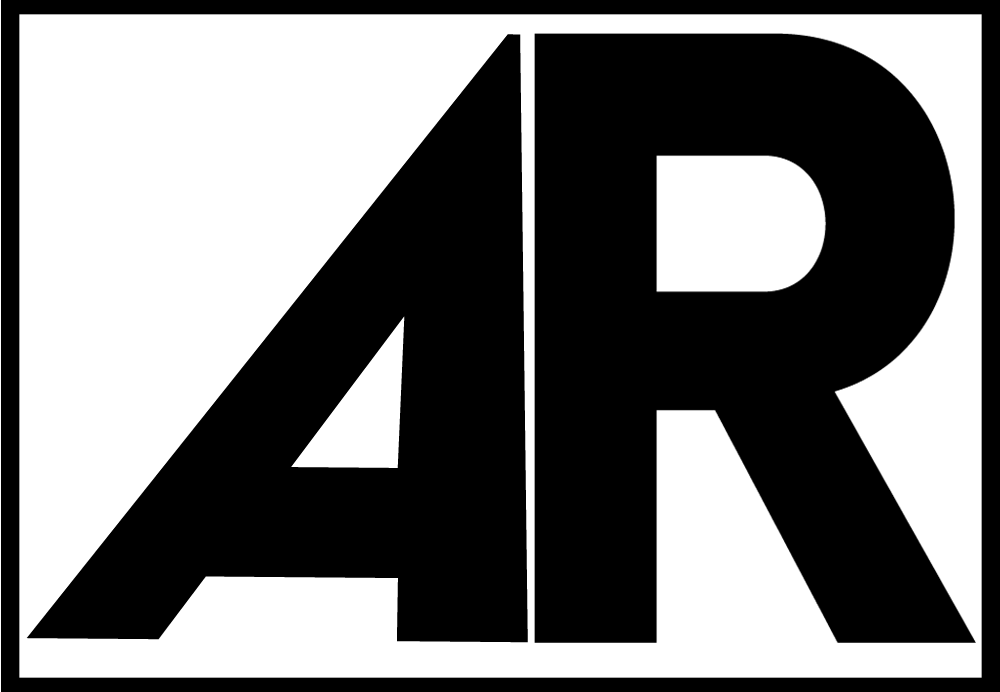
<style>
.page{position:relative;width:1000px;height:692px;background:#000000}
.page>*{position:absolute;margin:0}
.t1{font:877.4px "LoveloBlack";color:#000000;scale:0.92 1}
</style>
<div class="page">
<p class="t1" style="left:26px;top:34px;width:502px;height:609px">A</p>
</div>
